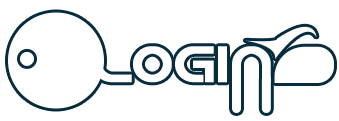
<style>
.page{position:relative;width:339px;height:121px;background:#ffffff}
.page>*{position:absolute;margin:0}
.t1{font:50.2px "Android";letter-spacing:-0.05em;color:#ffffff;font-variant:small-caps;font-weight:bold;scale:1.05 1}
</style>
<div class="page">
<p class="t1" style="left:93px;top:46px;width:178px;height:37px">LOGIN</p>
</div>
